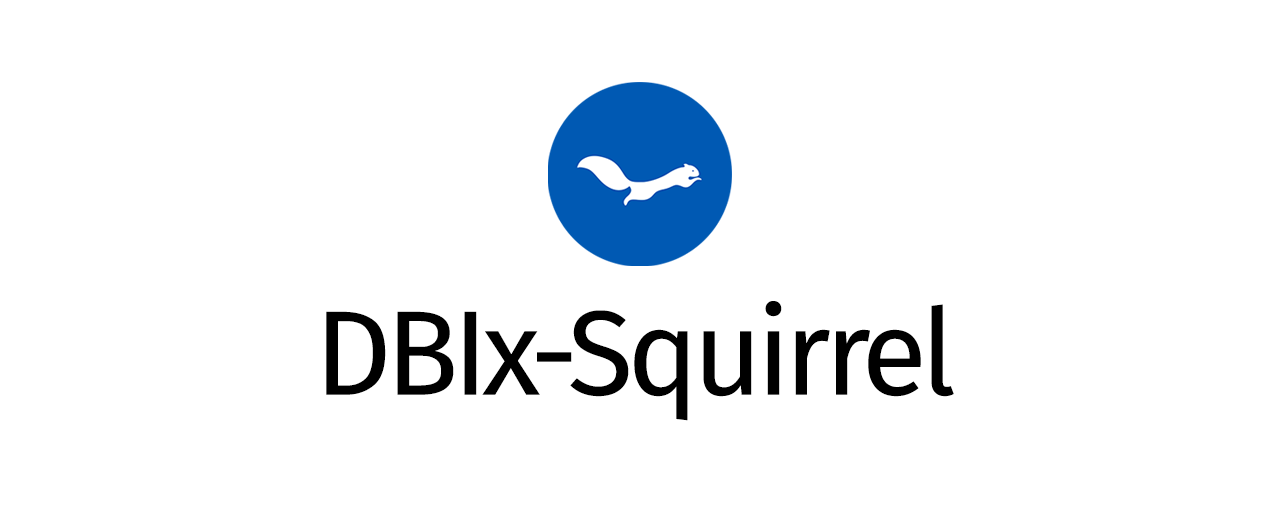
<style>
.page{position:relative;width:1280px;height:531px;background:#ffffff}
.page>*{position:absolute;margin:0}
.t1{font:120px "FiraSans-Regular";letter-spacing:-0.05em;color:#000000}
</style>
<div class="page">
<p class="t1" style="left:326px;top:301px;width:628px;height:120px">DBIx-Squirrel</p>
</div>
